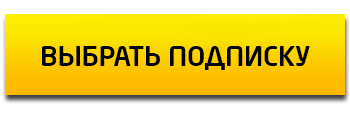
<style>
.page{position:relative;width:350px;height:115px;background:#ffffff}
.page>*{position:absolute;margin:0}
.t1{font:26.7px "NeoSansCyr-Medium";color:#000000}
</style>
<div class="page">
<p class="t1" style="left:42px;top:46px;width:268px;height:24px">ВЫБРАТЬ ПОДПИСКУ</p>
</div>
